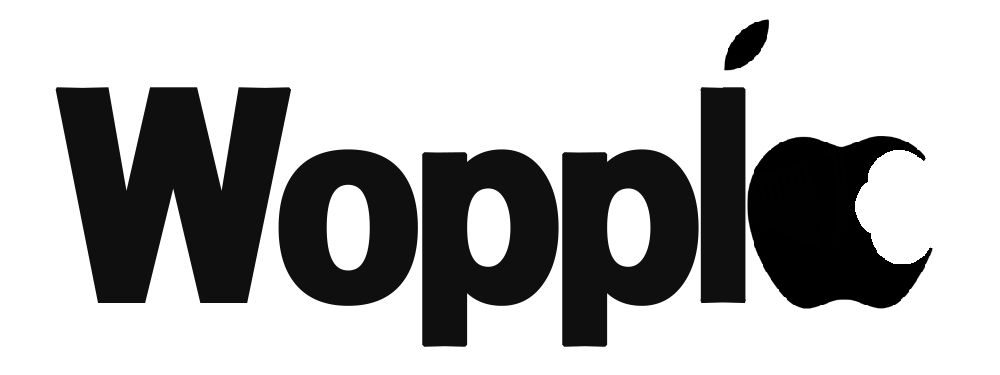
<style>
.page{position:relative;width:1000px;height:375px;background:#ffffff}
.page>*{position:absolute;margin:0}
.t1{font:288.7px "MaximumImpact";letter-spacing:-0.06em;color:#100f0f;font-weight:bold;scale:0.96 1}
</style>
<div class="page">
<p class="t1" style="left:55px;top:87px;width:691px;height:260px">Woppl</p>
</div>
